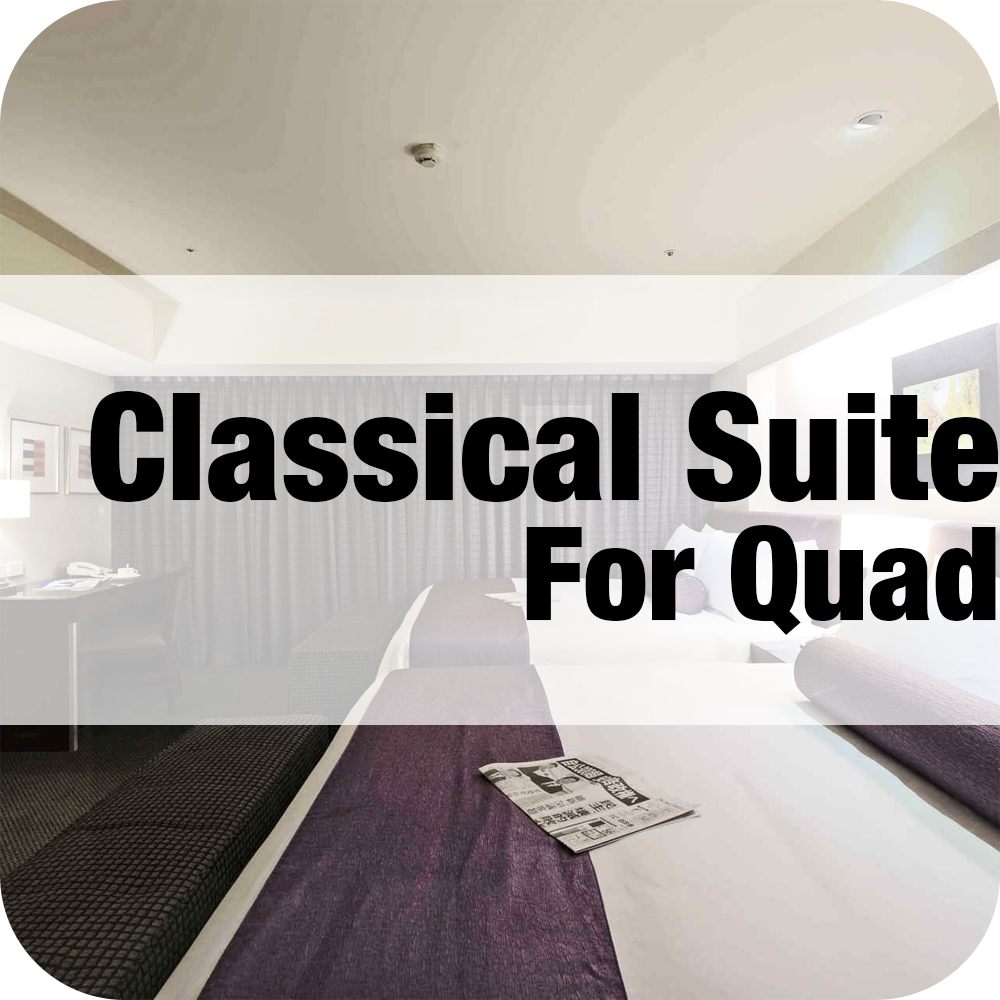
<style>
.page{position:relative;width:1000px;height:1000px}
.page>*{position:absolute;margin:0}
.t1{font:150px/120px "HelveticaNeue-CondensedBlack";color:#000000}
.t2{font:130px/120px "HelveticaNeue-CondensedBlack";color:#000000}
</style>
<div class="page">
<p class="t1" style="left:90px;top:391px;width:909px;height:244px;text-align:right">Classical Suite<br><span class="t2">For Quad</span></p>
</div>
